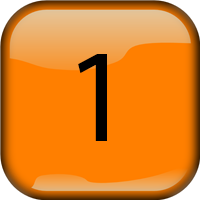
<style>
.page{position:relative;width:200px;height:200px;background:#ff7f00}
.page>*{position:absolute;margin:0}
.t1{font:133.3px "MyriadPro-Regular";color:#000000}
</style>
<div class="page">
<p class="t1" style="left:78px;top:54px;width:29px;height:87px">1</p>
</div>
